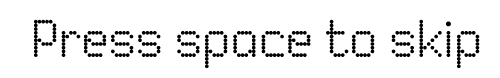
<style>
.page{position:relative;width:500px;height:78px;background:#ffffff}
.page>*{position:absolute;margin:0}
.t1{font:60px "Dited";color:#000000}
</style>
<div class="page">
<p class="t1" style="left:33px;top:19px;width:447px;height:50px">Press space to skip</p>
</div>
